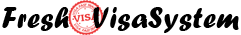
<style>
.page{position:relative;width:241px;height:35px;background:#ffffff}
.page>*{position:absolute;margin:0}
.t1{font:30px "ForteMT";letter-spacing:0.01em;color:#000000}
</style>
<div class="page">
<p class="t1" style="left:2px;top:7px;width:67px;height:24px">Fresh</p>
<p class="t1" style="left:93px;top:7px;width:146px;height:26px">VisaSystem</p>
</div>
